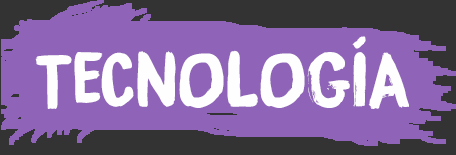
<style>
.page{position:relative;width:456px;height:155px;background:#8f63b8}
.page>*{position:absolute;margin:0}
.t1{font:80px "MidnightSunDEMO-Regular";color:#fffeff}
</style>
<div class="page">
<p class="t1" style="left:35px;top:36px;width:374px;height:73px">TECNOLOGÍA</p>
</div>
